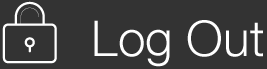
<style>
.page{position:relative;width:267px;height:69px;background:#333333}
.page>*{position:absolute;margin:0}
.t1{font:49.5px "HelveticaNeueLTCom-Lt";color:#ffffff}
</style>
<div class="page">
<p class="t1" style="left:94px;top:20px;width:169px;height:47px">Log Out</p>
</div>
